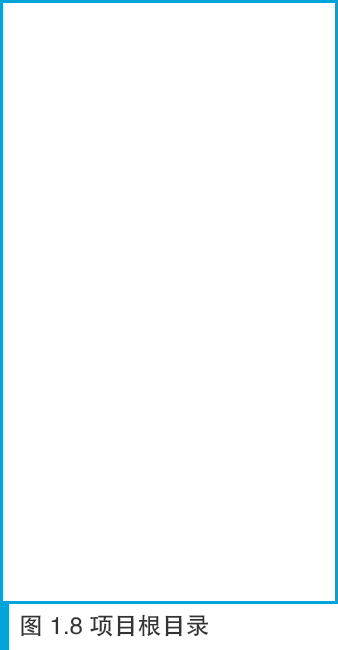
<style>
.page{position:relative;width:338px;height:650px;background:#ffffff}
.page>*{position:absolute;margin:0}
.t1{font:24px "FZHTJW--GB1-0";color:#333333}
</style>
<div class="page">
<p class="t1" style="left:21px;top:614px;width:188px;height:23px">图 1.8 项目根目录</p>
</div>
